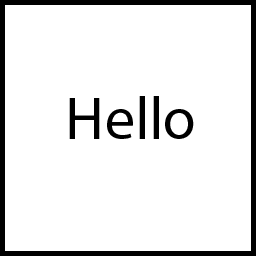
<style>
.page{position:relative;width:256px;height:256px;background:#ffffff}
.page>*{position:absolute;margin:0}
.t1{font:60px "MyriadPro-Regular";color:#000000}
</style>
<div class="page">
<p class="t1" style="left:69px;top:96px;width:125px;height:43px">Hello</p>
</div>
